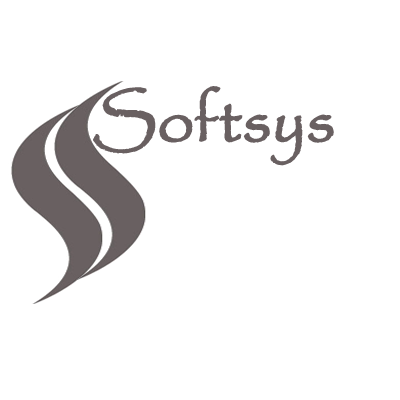
<style>
.page{position:relative;width:400px;height:400px;background:#ffffff}
.page>*{position:absolute;margin:0}
.t1{font:66.2px "Papyrus-Regular";letter-spacing:-0.02em;color:#696061;font-weight:bold}
</style>
<div class="page">
<p class="t1" style="left:93px;top:86px;width:241px;height:80px">Softsys</p>
</div>
